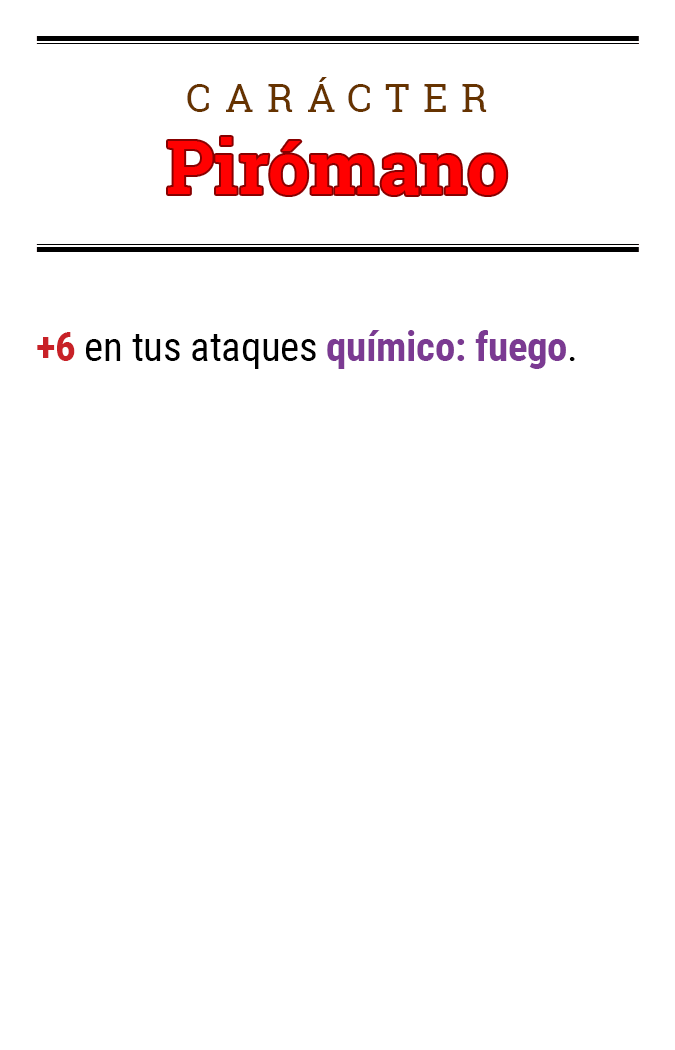
<style>
.page{position:relative;width:675px;height:1050px;background:#ffffff}
.page>*{position:absolute;margin:0}
.t1{font:39.2px "RobotoSlab-Regular";letter-spacing:0.34em;color:#663300}
.t2{font:74.5px "RobotoSlab-Bold";color:#ff0000}
.t3{font:41.1px "RobotoCondensed-Regular";letter-spacing:-0.01em;color:#000000}
.t4{font:41.1px "RobotoCondensed-Bold";letter-spacing:-0.01em;color:#c82127}
.t5{font:41.1px "RobotoCondensed-Bold";letter-spacing:-0.01em;color:#7b3a92}
</style>
<div class="page">
<p class="t1" style="left:187px;top:77px;width:300px;height:35px">CARÁCTER</p>
<p class="t2" style="left:168px;top:137px;width:339px;height:58px">Pirómano</p>
<p class="t3" style="left:37px;top:330px;width:538px;height:39px"><span class="t4">+6</span> en tus ataques <span class="t5">químico: fuego</span>.</p>
</div>
